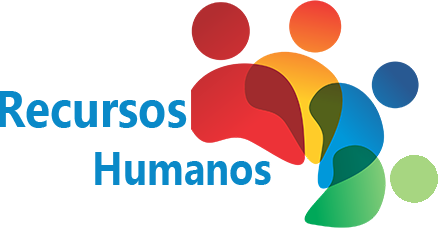
<style>
.page{position:relative;width:438px;height:231px;background:#ffffff}
.page>*{position:absolute;margin:0}
.t1{font:50.5px "MyanmarText-Bold";color:#0a89c8;scale:0.91 1}
.t2{font:46.7px "MyanmarText-Bold";color:#0a89c8;scale:0.85 1}
</style>
<div class="page">
<p class="t1" style="left:0px;top:91px;width:187px;height:37px">Recursos</p>
<p class="t2" style="left:95px;top:152px;width:176px;height:33px">Humanos</p>
</div>
